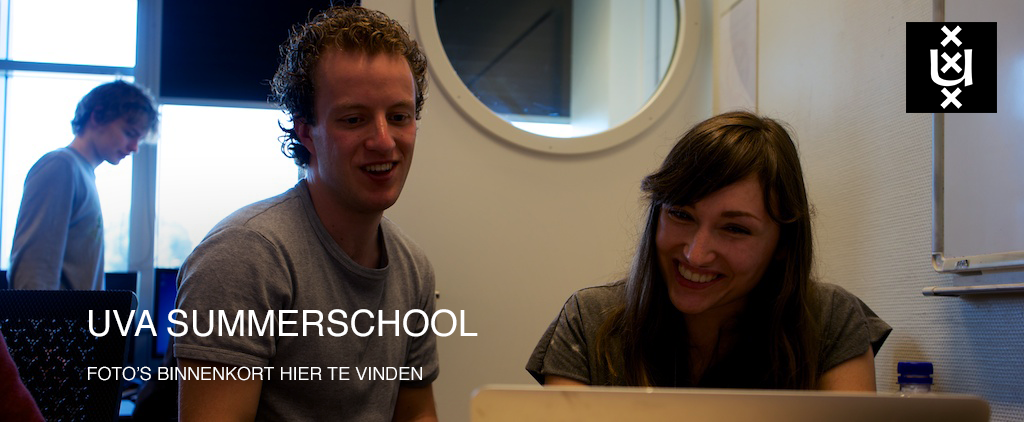
<style>
.page{position:relative;width:1024px;height:422px}
.page>*{position:absolute;margin:0}
.t1{font:18px "Helvetica";color:#ffffff;text-transform:uppercase}
.t2{font:36px "Helvetica";color:#ffffff;text-transform:uppercase}
</style>
<div class="page">
<p class="t1" style="left:88px;top:309px;width:390px;height:72px"><span class="t2">Uva summerschool<br></span><br>foto’s binnenkort hier te vinden</p>
</div>
